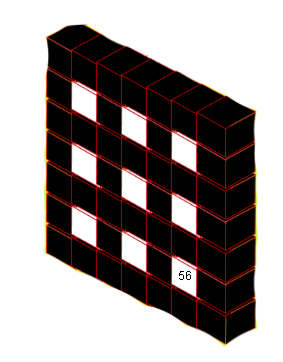
<style>
.page{position:relative;width:283px;height:362px;background:#ffffff}
.page>*{position:absolute;margin:0}
.t1{font:12px "ArialMT";color:#000000}
</style>
<div class="page">
<p class="t1" style="left:179px;top:271px;width:12px;height:9px">56</p>
</div>
